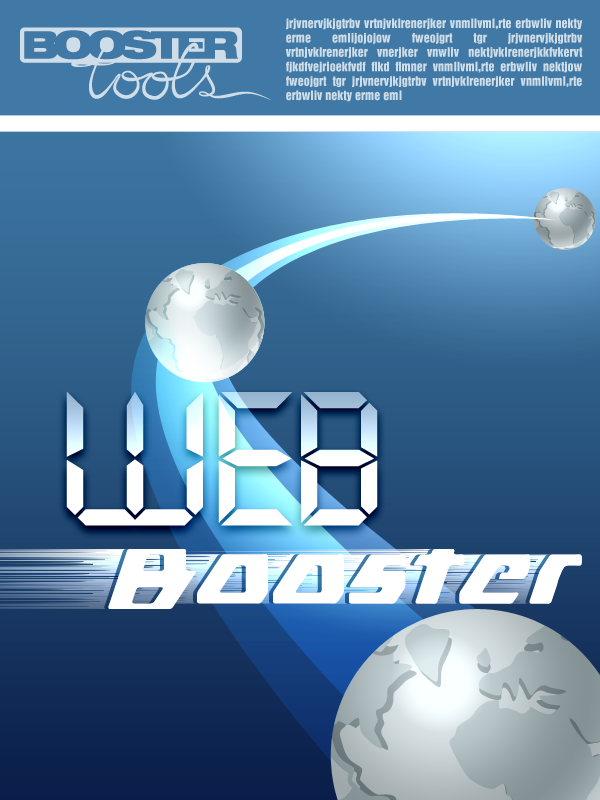
<style>
.page{position:relative;width:600px;height:800px}
.page>*{position:absolute;margin:0}
.t1{font:12px "HelveticaInseratLTStd-Roman";color:#cfdde8}
.t2{font:185.2px "Digiface";color:#ffffff}
</style>
<div class="page">
<p class="t1" style="left:285px;top:18px;width:298px;height:84px;text-align:justify">jrjvnervjkjgtrbv vrtnjvklrenerjker vnmllvml,rte erbwliv nekty erme emlijojojow fweojgrt tgr jrjvnervjkjgtrbv vrtnjvklrenerjker vnerjker vnwliv nektjvklrenerjkkfvkervt fjkdfvejrioekfvdf flkd flmner vnmllvml,rte erbwliv nektjow fweojgrt tgr jrjvnervjkjgtrbv vrtnjvklrenerjker vnmllvml,rte erbwliv nekty erme eml</p>
<p class="t2" style="left:66px;top:392px;width:312px;height:134px">WEB</p>
</div>
